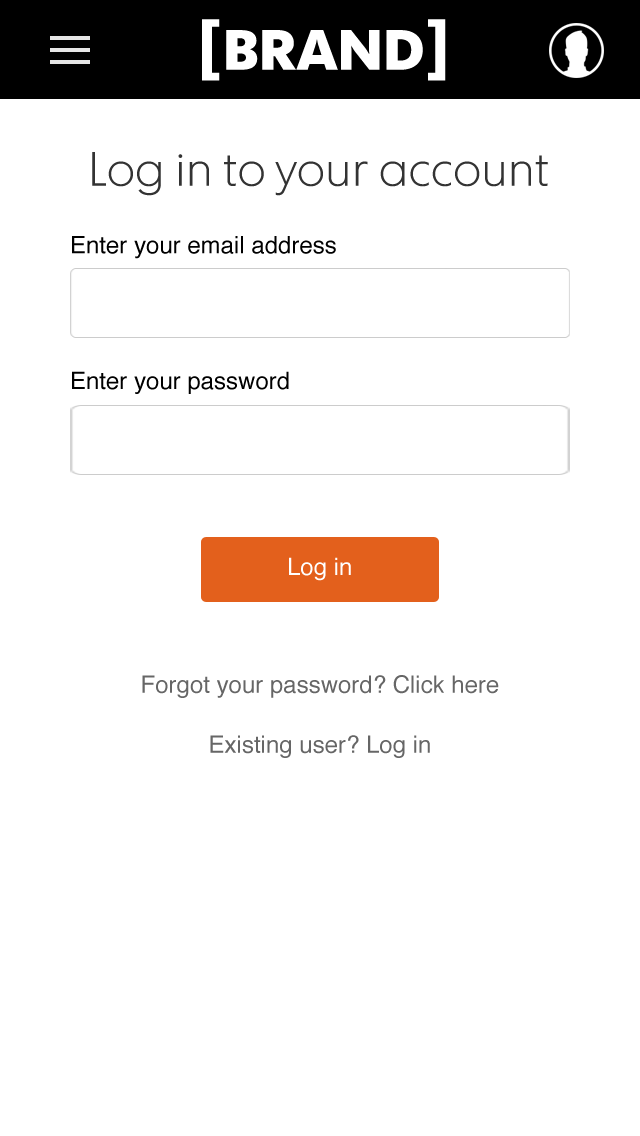
<style>
.page{position:relative;width:640px;height:1136px;background:#ffffff}
.page>*{position:absolute;margin:0}
.t1{font:56.6px "FuturaTodayScreen-Bold";color:#ffffff}
.t2{font:72px "FuturaTodayScreen-Bold";color:#ffffff}
.t3{font:48px "FuturaTodayScreen-Light";color:#333333}
.t4{font:24px "Helvetica";color:#000000}
.t5{font:24px "Helvetica";color:#ffffff}
.t6{font:24px "Helvetica";color:#666666}
</style>
<div class="page">
<p class="t1" style="left:202px;top:19px;width:244px;height:62px"><span class="t2">[</span>BRAND<span class="t2">]</span></p>
<p class="t3" style="left:92px;top:152px;width:456px;height:44px">Log in to your account</p>
<p class="t4" style="left:72px;top:236px;width:264px;height:23px">Enter your email address</p>
<p class="t4" style="left:72px;top:371px;width:217px;height:23px">Enter your password</p>
<p class="t5" style="left:289px;top:557px;width:62px;height:24px">Log in</p>
<p class="t6" style="left:142px;top:675px;width:357px;height:23px">Forgot your password? Click here</p>
<p class="t6" style="left:210px;top:735px;width:220px;height:23px">Existing user? Log in</p>
</div>
